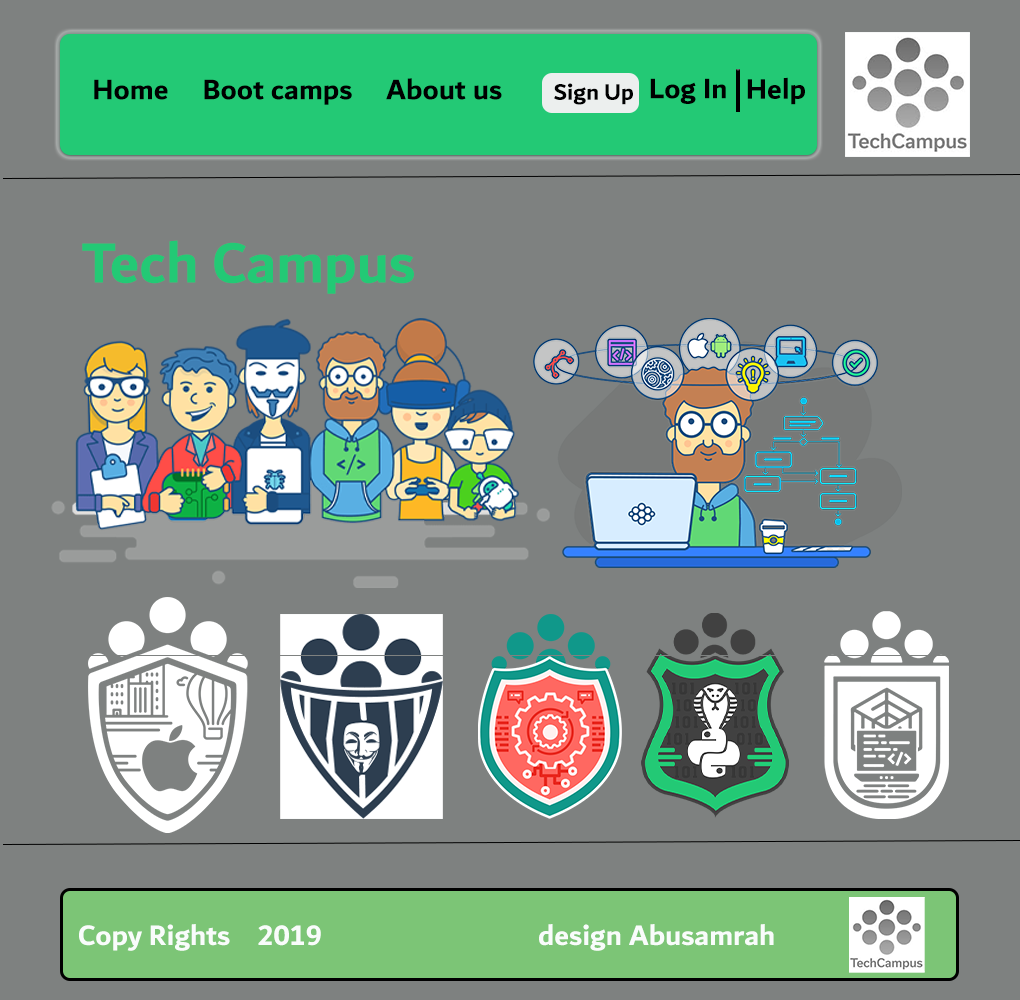
<style>
.page{position:relative;width:1020px;height:1000px;background:#7e8180}
.page>*{position:absolute;margin:0}
.t1{font:30px "Dubai-Bold";color:#000000}
.t2{font:24px "Dubai-Bold";color:#000000}
.t3{font:60px "Dubai-Bold";color:#23c975}
.t4{font:30px "Dubai-Bold";color:#f9fcfb}
</style>
<div class="page">
<p class="t1" style="left:94px;top:78px;width:408px;height:27px">Home     Boot camps     About us</p>
<p class="t1" style="left:650px;top:78px;width:76px;height:26px">Log In</p>
<p class="t1" style="left:747px;top:77px;width:58px;height:28px">Help</p>
<p class="t2" style="left:554px;top:83px;width:79px;height:22px">Sign Up</p>
<p class="t3" style="left:82px;top:240px;width:332px;height:54px">Tech Campus</p>
<p class="t4" style="left:79px;top:924px;width:695px;height:27px">Copy Rights    2019                                design Abusamrah</p>
</div>
